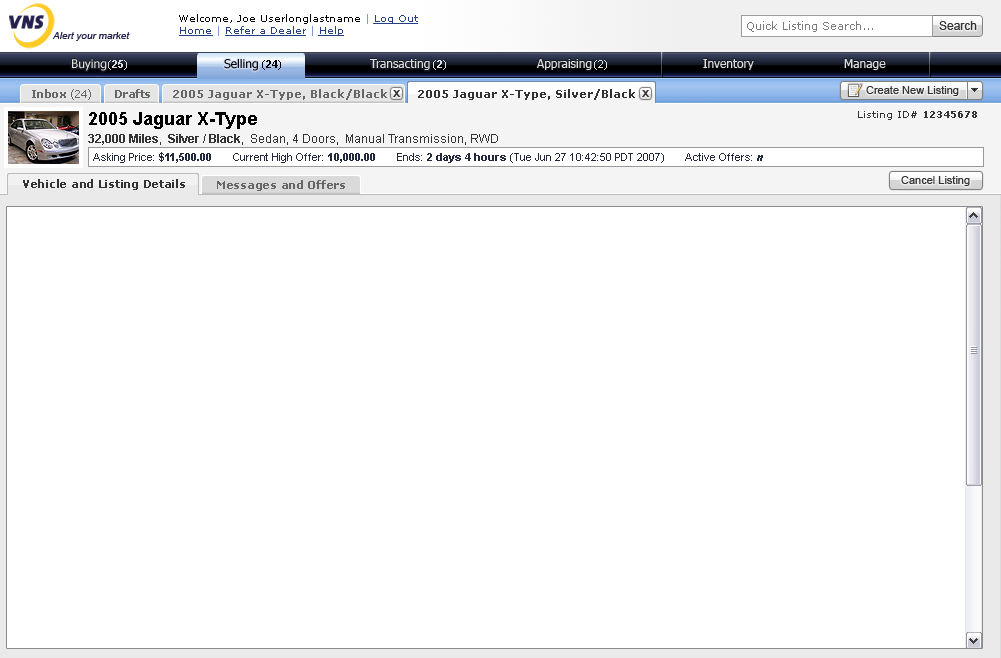
<style>
.page{position:relative;width:1001px;height:658px;background:#ffffff}
.page>*{position:absolute;margin:0}
.t1{font:10px "Verdana";color:#010101}
.t2{font:10px "Verdana";color:#7f9ada}
.t3{font:10px "Verdana";color:#254085;text-decoration:underline}
.t4{font:11px "Verdana";color:#7c7c7c}
.t5{font:12px "ArialMT";color:#333333}
.t6{font:10px "Arial-ItalicMT";color:#24214f}
.t7{font:12px "Tahoma";color:#dededc}
.t8{font:11px "Arial-BoldMT";color:#dededc}
.t9{font:11px "ArialMT";color:#dededc}
.t10{font:12px "Tahoma";color:#010101}
.t11{font:11px "Arial-BoldMT";color:#010101}
.t12{font:11px "ArialMT";color:#010101}
.t13{font:11px "Verdana-Bold";letter-spacing:-0.05em;color:#666666}
.t14{font:11px "Verdana";letter-spacing:-0.05em;color:#666666}
.t15{font:11px "Verdana-Bold";color:#666666}
.t16{font:11px "Verdana-Bold";color:#323232}
.t17{font:11px "ArialMT";color:#333333}
.t18{font:10px "Arial-BoldMT";color:#333333;scale:1.1 1}
.t19{font:12px/18px "ArialMT";color:#333333}
.t20{font:18px/18px "Arial-BoldMT";color:#000000}
.t21{font:12px/18px "Arial-BoldMT";color:#333333}
.t22{font:10px "Verdana";color:#333333}
.t23{font:10px "Verdana-Bold";color:#333333}
.t24{font:11px "ArialMT";color:#22293d}
.t25{font:11px "Arial-BoldMT";color:#22293d}
.t26{font:11px "Arial-BoldItalicMT";color:#22293d}
.t27{font:11px "Verdana-Bold";letter-spacing:-0.025em;color:#323232}
.t28{font:11px "Verdana-Bold";letter-spacing:-0.025em;color:#666666}
</style>
<div class="page">
<p class="t1" style="left:179px;top:14px;width:239px;height:10px">Welcome, Joe Userlonglastname<span class="t2"> | </span><span class="t3">Log Out</span></p>
<p class="t3" style="left:179px;top:26px;width:165px;height:10px">Home <span class="t2">| </span>Refer a Dealer <span class="t2">| </span>Help</p>
<p class="t4" style="left:747px;top:21px;width:126px;height:11px">Quick Listing Search...</p>
<p class="t5" style="left:939px;top:21px;width:38px;height:9px">Search</p>
<p class="t6" style="left:52px;top:32px;width:78px;height:9px">Alert your market</p>
<p class="t7" style="left:72px;top:59px;width:35px;height:12px">Buying</p>
<p class="t8" style="left:108px;top:60px;width:19px;height:10px"><span class="t9"> (</span>25<span class="t9">)</span></p>
<p class="t10" style="left:224px;top:59px;width:34px;height:12px">Selling</p>
<p class="t11" style="left:262px;top:60px;width:19px;height:10px"><span class="t12"> (</span>24<span class="t12">)</span></p>
<p class="t7" style="left:369px;top:59px;width:61px;height:11px">Transacting</p>
<p class="t9" style="left:433px;top:60px;width:13px;height:10px">(<span class="t8">2</span>)</p>
<p class="t7" style="left:537px;top:59px;width:55px;height:11px">Appraising</p>
<p class="t9" style="left:594px;top:60px;width:13px;height:10px">(2)</p>
<p class="t7" style="left:703px;top:59px;width:51px;height:11px">Inventory</p>
<p class="t7" style="left:844px;top:59px;width:42px;height:11px">Manage</p>
<p class="t13" style="left:32px;top:89px;width:59px;height:11px">Inbox <span class="t14">(24)</span></p>
<p class="t13" style="left:115px;top:89px;width:35px;height:9px">Drafts</p>
<p class="t15" style="left:173px;top:89px;width:214px;height:11px">2005 Jaguar X-Type, Black/Black</p>
<p class="t16" style="left:418px;top:89px;width:217px;height:11px">2005 Jaguar X-Type, Silver/Black</p>
<p class="t17" style="left:866px;top:86px;width:93px;height:10px">Create New Listing</p>
<p class="t18" style="left:393px;top:90px;width:8px;height:7px">X</p>
<p class="t18" style="left:642px;top:90px;width:8px;height:7px">X</p>
<p class="t19" style="left:88px;top:112px;width:410px;height:33px"><span class="t20">2005 Jaguar X-Type <br></span><span class="t21">32,000 Miles</span>,  <span class="t21">Silver / Black</span>,  Sedan, 4 Doors,  Manual Transmission, RWD</p>
<p class="t22" style="left:858px;top:111px;width:119px;height:9px">Listing ID# <span class="t23">12345678</span></p>
<p class="t24" style="left:93px;top:152px;width:670px;height:11px">Asking Price: <span class="t25">$11,500.00       </span>Current High Offer: <span class="t25">10,000.00       </span>Ends:<span class="t25"> 2 days 4 hours </span>(Tue Jun 27 10:42:50 PDT 2007)       Active Offers: <span class="t26">n</span></p>
<p class="t27" style="left:23px;top:179px;width:162px;height:11px">Vehicle and Listing Details</p>
<p class="t28" style="left:217px;top:180px;width:128px;height:11px">Messages and Offers</p>
<p class="t17" style="left:901px;top:176px;width:69px;height:10px">Cancel Listing</p>
</div>
